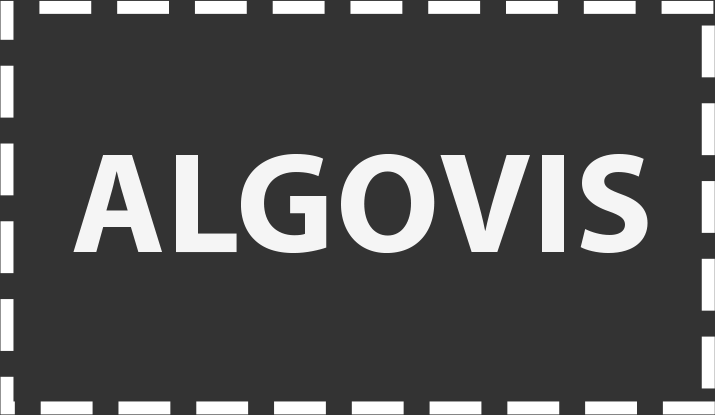
<style>
.page{position:relative;width:715px;height:415px;background:#333333}
.page>*{position:absolute;margin:0}
.t1{font:144px "MyriadPro-Bold";letter-spacing:0.01em;color:#f5f5f5}
</style>
<div class="page">
<p class="t1" style="left:73px;top:153px;width:575px;height:100px">ALGOVIS</p>
</div>
